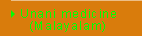
<style>
.page{position:relative;width:142px;height:36px;background:#d97c0c}
.page>*{position:absolute;margin:0}
.t1{font:12px/12px "ArialMT";letter-spacing:0.09em;color:#01ff00}
</style>
<div class="page">
<p class="t1" style="left:21px;top:9px;width:95px;height:23px">Unani medicine<br>  (Malayalam)</p>
</div>
